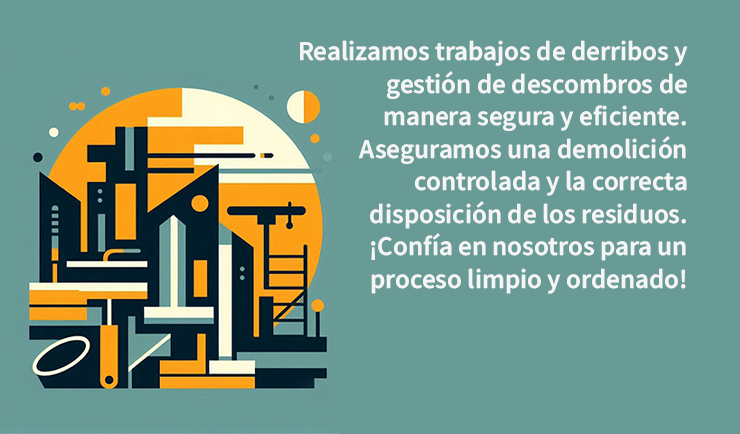
<style>
.page{position:relative;width:740px;height:434px;background:#689b96}
.page>*{position:absolute;margin:0}
.t1{font:27.1px "SourceSansRoman-Semibold";color:#f5f5f5}
</style>
<div class="page">
<p class="t1" style="left:300px;top:40px;width:388px;height:254px;text-align:right">Realizamos trabajos de derribos y gestión de descombros de manera segura y eficiente. Aseguramos una demolición controlada y la correcta disposición de los residuos. ¡Confía en nosotros para un proceso limpio y ordenado!</p>
</div>
